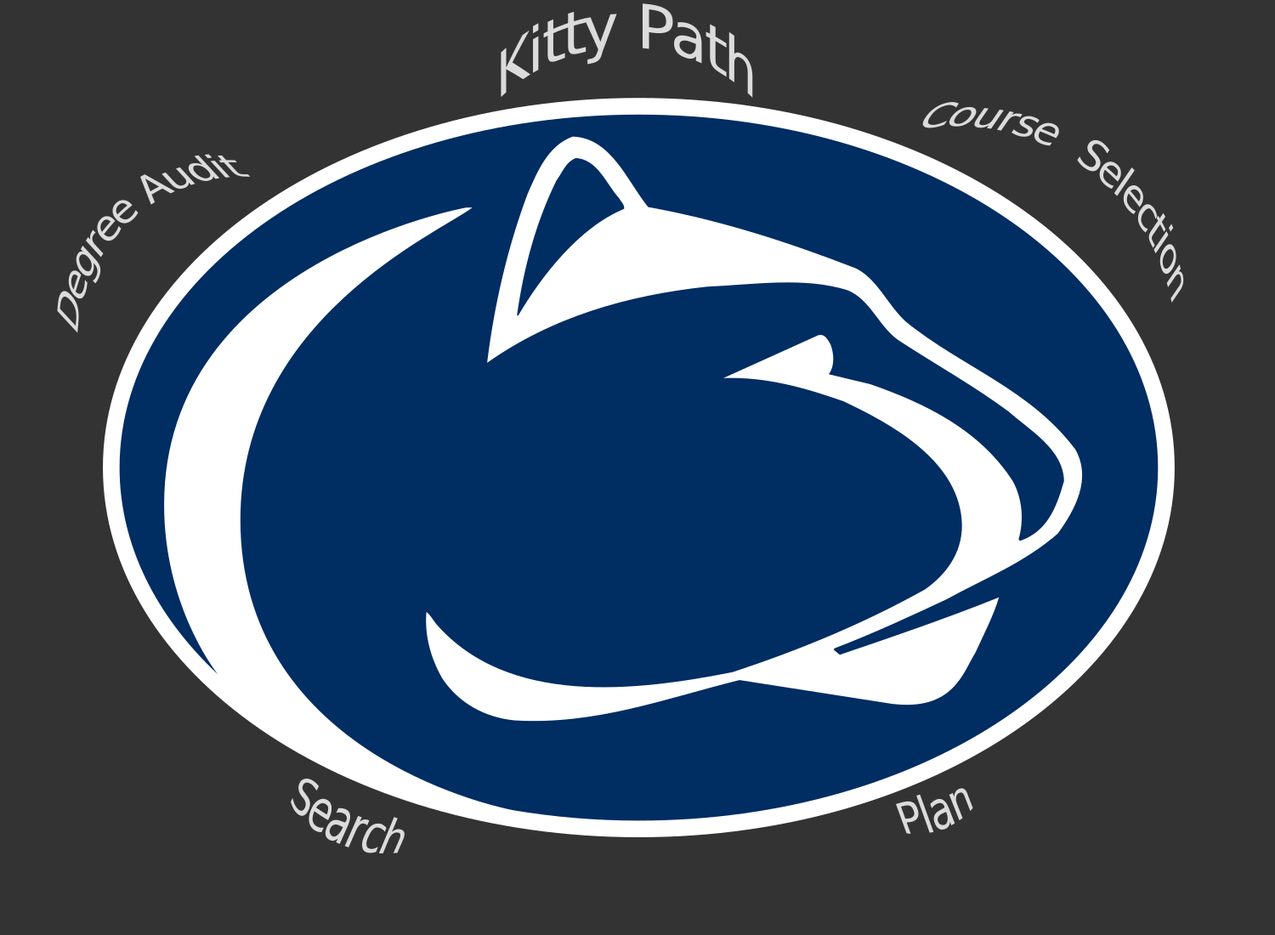
<style>
.page{position:relative;width:1275px;height:935px;background:#333333}
.page>*{position:absolute;margin:0}
.t1{font:61.2px "Tahoma";color:#dbdbdb}
.t2{font:40.8px "Tahoma";color:#dbdbdb}
</style>
<div class="page">
<p class="t1" style="left:501px;top:3px;width:252px;height:95px">Kitty Path</p>
<p class="t2" style="left:922px;top:102px;width:262px;height:201px;rotate:34deg">Course  Selection</p>
<p class="t2" style="left:57px;top:154px;width:194px;height:179px;rotate:-43deg">Degree Audit</p>
<p class="t2" style="left:291px;top:779px;width:114px;height:75px;rotate:24deg">Search</p>
<p class="t2" style="left:896px;top:788px;width:77px;height:46px;rotate:-21deg">Plan</p>
</div>
